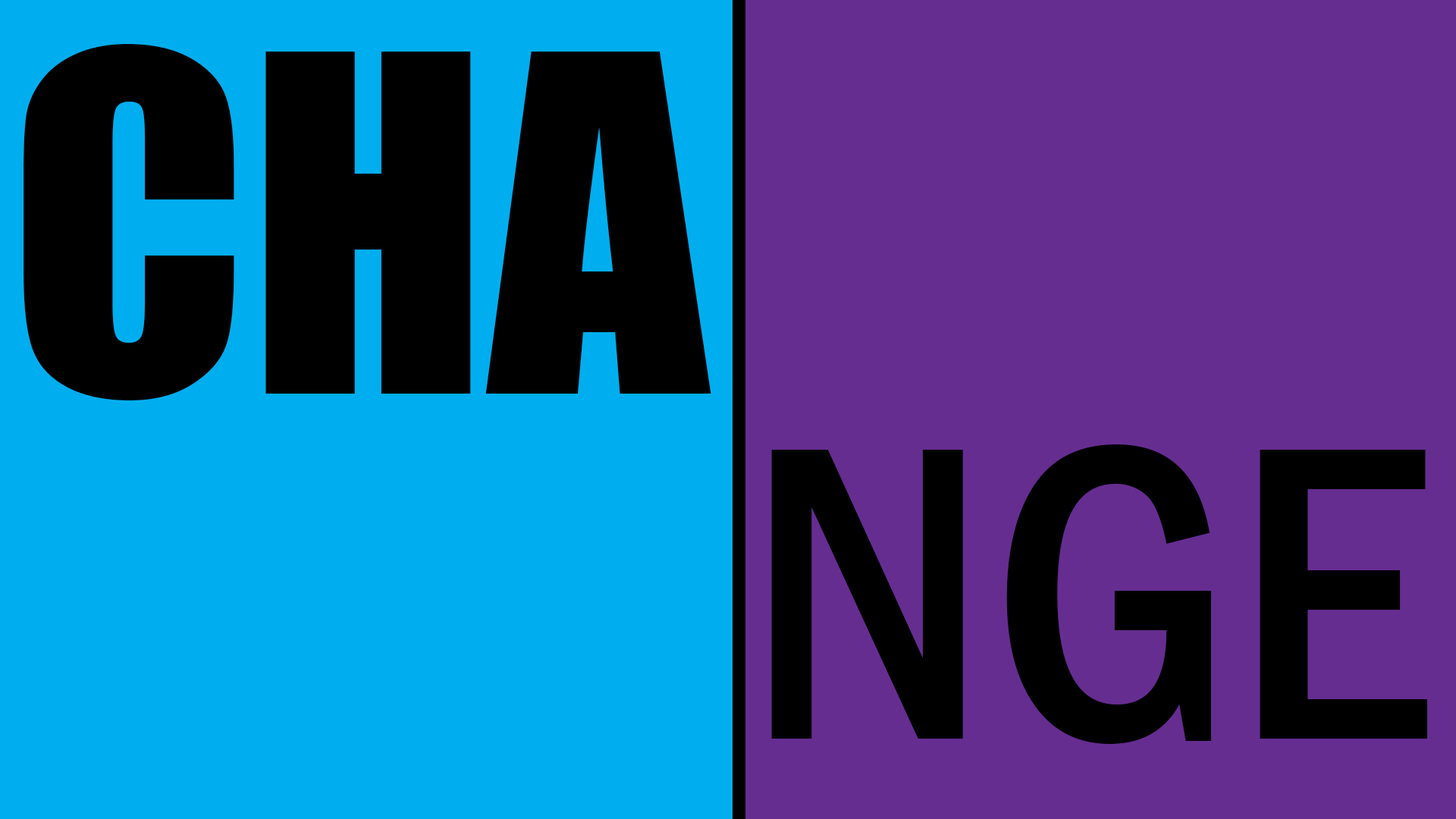
<style>
.page{position:relative;width:1456px;height:819px;background:#662d91}
.page>*{position:absolute;margin:0}
.t1{font:433.3px "Impact";color:#000000}
.t2{font:433.3px "FranklinGothic-MediumCond";color:#000000}
</style>
<div class="page">
<p class="t1" style="left:24px;top:44px;width:687px;height:356px">CHA</p>
<p class="t2" style="left:771px;top:444px;width:657px;height:300px">NGE</p>
</div>
